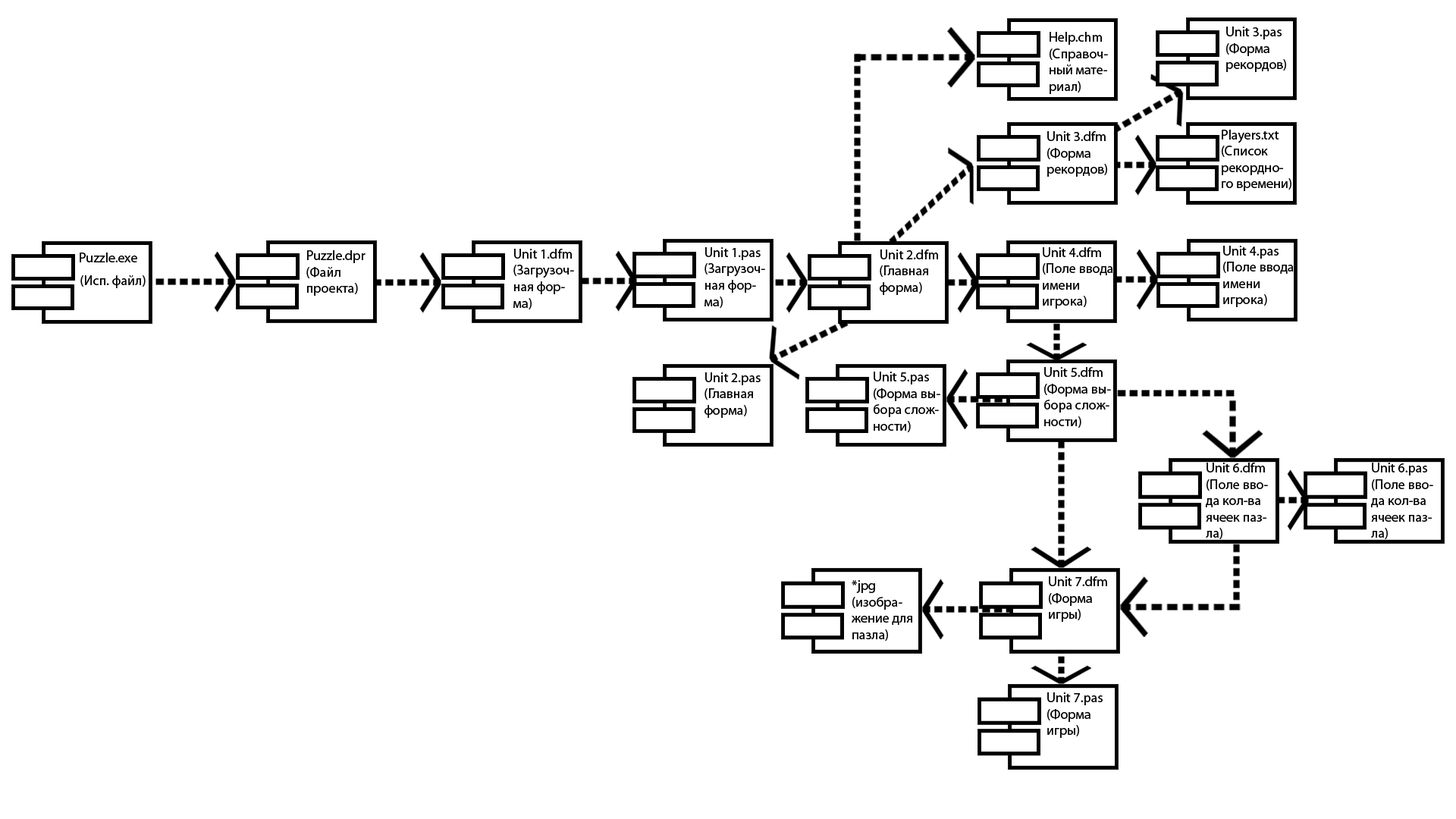
<style>
.page{position:relative;width:1456px;height:819px;background:#ffffff}
.page>*{position:absolute;margin:0}
.t1{font:13.6px "MyriadPro-Regular";color:#000000}
</style>
<div class="page">
<p class="t1" style="left:1226px;top:27px;width:60px;height:45px">Unit 3.pas<br>(Форма <br>рекордов)</p>
<p class="t1" style="left:1050px;top:32px;width:58px;height:62px">Help.chm<br>(Справоч-<br>ный мате-<br>риал)</p>
<p class="t1" style="left:1047px;top:131px;width:60px;height:46px">Unit 3.dfm<br>(Форма <br>рекордов)</p>
<p class="t1" style="left:1222px;top:130px;width:69px;height:61px">Players.txt<br>(Список<br>рекордно-<br>го времени)</p>
<p class="t1" style="left:1223px;top:246px;width:71px;height:61px">Unit 4.pas<br>(Поле ввода<br>имени <br>игрока)</p>
<p class="t1" style="left:80px;top:253px;width:57px;height:9px">Puzzle.exe</p>
<p class="t1" style="left:306px;top:250px;width:60px;height:46px">Puzzle.dpr<br>(Файл<br>проекта)</p>
<p class="t1" style="left:513px;top:249px;width:61px;height:60px">Unit 1.dfm<br>(Загрузоч-<br>ная фор-<br>ма)</p>
<p class="t1" style="left:704px;top:247px;width:61px;height:61px">Unit 1.pas<br>(Загрузоч-<br>ная фор-<br>ма)</p>
<p class="t1" style="left:880px;top:249px;width:58px;height:46px">Unit 2.dfm<br>(Главная<br>форма)</p>
<p class="t1" style="left:1043px;top:247px;width:70px;height:62px">Unit 4.dfm<br>(Поле ввода<br>имени <br>игрока)</p>
<p class="t1" style="left:80px;top:275px;width:66px;height:13px">(Исп. файл)</p>
<p class="t1" style="left:704px;top:372px;width:57px;height:46px">Unit 2.pas<br>(Главная<br>форма)</p>
<p class="t1" style="left:874px;top:372px;width:66px;height:60px">Unit 5.pas<br>(Форма вы-<br>бора слож-<br>ности)</p>
<p class="t1" style="left:1044px;top:367px;width:67px;height:61px">Unit 5.dfm<br>(Форма вы-<br>бора слож-<br>ности)</p>
<p class="t1" style="left:1206px;top:463px;width:62px;height:76px">Unit 6.dfm<br>(Поле вво-<br>да кол-ва <br>ячеек паз-<br>ла)</p>
<p class="t1" style="left:1371px;top:463px;width:62px;height:76px">Unit 6.pas<br>(Поле вво-<br>да кол-ва <br>ячеек паз-<br>ла)</p>
<p class="t1" style="left:852px;top:580px;width:60px;height:61px">*jpg<br>(изобра-<br>жение для<br>пазла)</p>
<p class="t1" style="left:1049px;top:576px;width:58px;height:46px">Unit 7.dfm<br>(Форма<br>игры)</p>
<p class="t1" style="left:1047px;top:692px;width:56px;height:46px">Unit 7.pas<br>(Форма<br>игры)</p>
</div>
